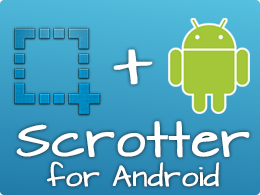
<style>
.page{position:relative;width:260px;height:195px}
.page>*{position:absolute;margin:0}
.t1{font:59.7px "ArchitectsDaughter";color:#ffffff;font-weight:bold}
.t2{font:24px/30px "ArchitectsDaughter";color:#ffffff;font-weight:bold}
.t3{font:42px/30px "ArchitectsDaughter";color:#ffffff;font-weight:bold}
</style>
<div class="page">
<p class="t1" style="left:113px;top:49px;width:40px;height:36px">+</p>
<p class="t2" style="left:16px;top:121px;width:234px;height:66px;text-align:center"><span class="t3">Scrotter<br></span>for Android</p>
</div>
